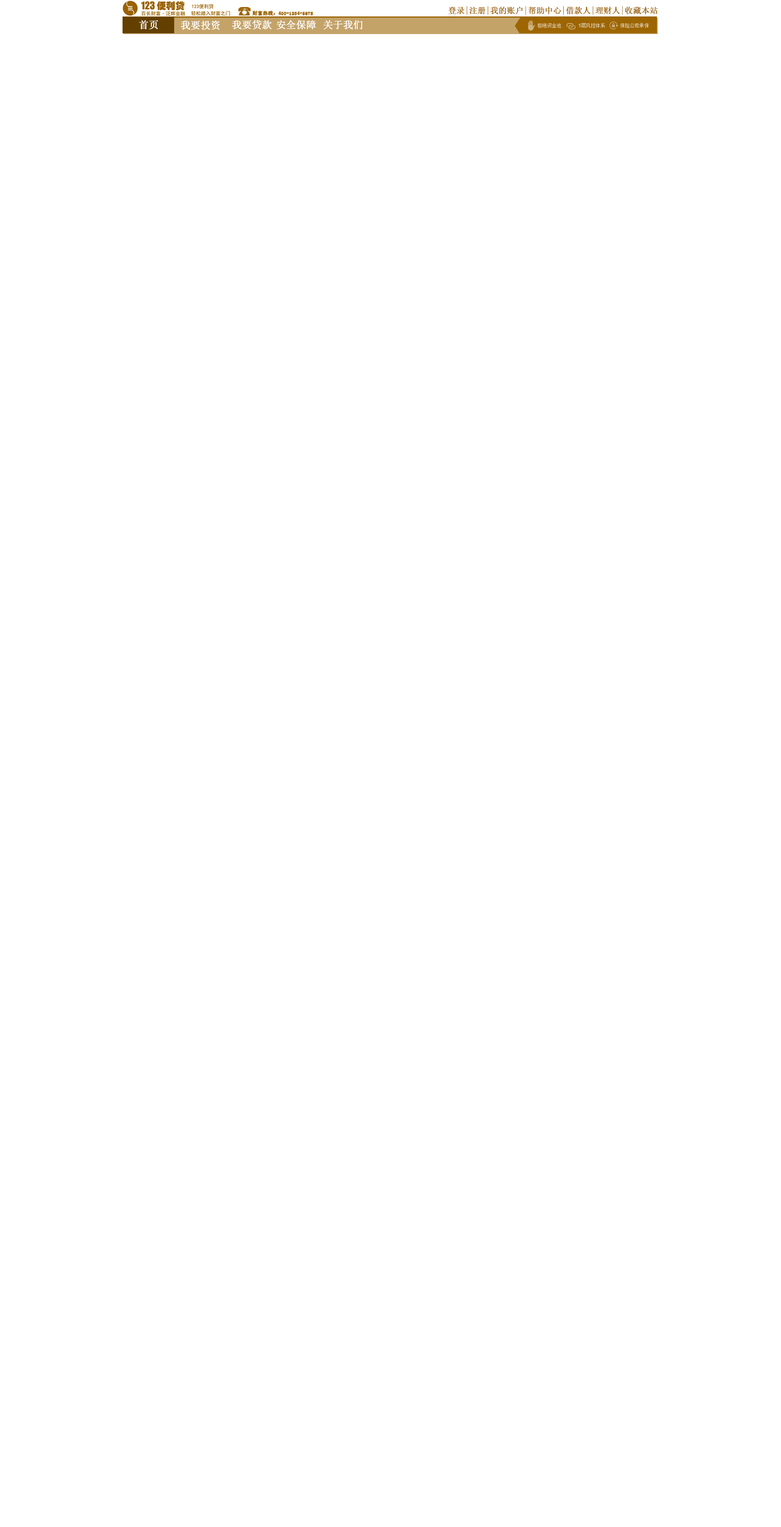
<style>
.page{position:relative;width:781px;height:1527px;background:#ffffff}
.page>*{position:absolute;margin:0}
.t1{font:8.2px "SimSun";color:#9a6201;font-weight:bold}
.t2{font:9.8px "SimSun";color:#ffffff;font-weight:bold}
</style>
<div class="page">
<p class="t1" style="left:448px;top:6px;width:210px;height:9px">登录|注册|我的账户|帮助中心|借款人|理财人|收藏本站</p>
<p class="t2" style="left:139px;top:20px;width:19px;height:9px">首页</p>
<p class="t2" style="left:181px;top:20px;width:39px;height:10px">我要投资</p>
<p class="t2" style="left:232px;top:20px;width:40px;height:10px">我要贷款</p>
<p class="t2" style="left:276px;top:20px;width:40px;height:10px">安全保障</p>
<p class="t2" style="left:323px;top:20px;width:40px;height:9px">关于我们</p>
</div>
